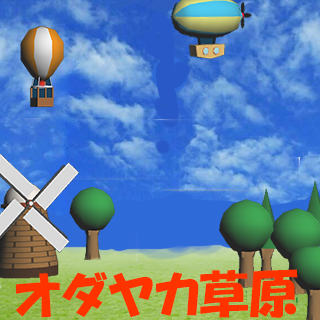
<style>
.page{position:relative;width:320px;height:320px}
.page>*{position:absolute;margin:0}
.t1{font:50px "HGPSoeiKakupoptai";color:#ff3300}
</style>
<div class="page">
<p class="t1" style="left:15px;top:269px;width:283px;height:49px">オダヤカ草原</p>
</div>
